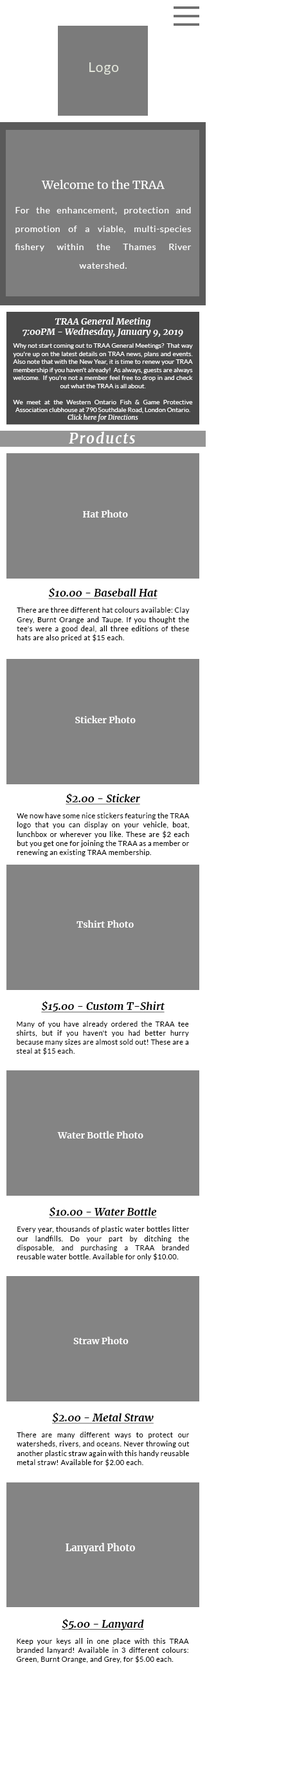
<style>
.page{position:relative;width:288px;height:1773px;background:#ffffff}
.page>*{position:absolute;margin:0}
.t1{font:13.5px "Lato-Regular";letter-spacing:0.05em;color:#e2e5da}
.t2{font:11.6px "Merriweather-Regular";color:#ffffff}
.t3{font:9px/18.3px "Lato-Regular";letter-spacing:0.05em;color:#ffffff}
.t4{font:9px "Merriweather-BoldItalic";color:#ffffff}
.t5{font:6.4px/8px "Lato-Regular";color:#ffffff}
.t6{font:6.4px/8px "Merriweather-Italic";color:#ffffff}
.t7{font:14.1px "Merriweather-BoldItalic";letter-spacing:0.085em;color:#ffffff}
.t8{font:9px "Merriweather-Bold";color:#fefefe}
.t9{font:10.3px "Merriweather-BoldItalic";color:#000000;text-decoration:underline;scale:1.03 1}
.t10{font:7.1px/9.1px "Lato-Regular";letter-spacing:0.05em;color:#000000}
.t11{font:9.5px "Merriweather-Bold";color:#fefefe}
</style>
<div class="page">
<p class="t1" style="left:89px;top:62px;width:30px;height:13px">Logo</p>
<p class="t2" style="left:41px;top:179px;width:124px;height:10px">Welcome to the TRAA</p>
<p class="t3" style="left:15px;top:207px;width:177px;height:62px;text-align:justify">For the enhancement, protection and promotion of a viable, multi-species fishery within the Thames River watershed.</p>
<p class="t4" style="left:22px;top:317px;width:161px;height:20px;text-align:center">TRAA General Meeting<br>7:00PM - Wednesday, January 9, 2019</p>
<p class="t5" style="left:13px;top:343px;width:180px;height:79px;text-align:justify">Why not start coming out to TRAA General Meetings?  That way you're up on the latest details on TRAA news, plans and events.  Also note that with the New Year, it is time to renew your TRAA membership if you haven't already!  As always, guests are always welcome.  If you're not a member feel free to drop in and check out what the TRAA is all about.<br><br>We meet at the Western Ontario Fish &amp; Game Protective Association clubhouse at 790 Southdale Road, London Ontario. <span class="t6"> <br>Click here for Directions</span></p>
<p class="t7" style="left:69px;top:431px;width:66px;height:13px">Products</p>
<p class="t8" style="left:83px;top:510px;width:45px;height:7px">Hat Photo</p>
<p class="t9" style="left:48px;top:588px;width:109px;height:11px">$10.00 - Baseball Hat</p>
<p class="t10" style="left:17px;top:607px;width:173px;height:35px;text-align:justify">There are three different hat colours available: Clay Grey, Burnt Orange and Taupe. If you thought the tee's were a good deal, all three editions of these hats are also priced at $15 each.</p>
<p class="t8" style="left:75px;top:715px;width:61px;height:8px">Sticker Photo</p>
<p class="t9" style="left:66px;top:793px;width:74px;height:12px">$2.00 - Sticker</p>
<p class="t10" style="left:17px;top:813px;width:173px;height:43px;text-align:justify">We now have some nice stickers featuring the TRAA logo that you can display on your vehicle, boat, lunchbox or wherever you like. These are $2 each but you get one for joining the TRAA as a member or renewing an existing TRAA membership.</p>
<p class="t8" style="left:76px;top:920px;width:58px;height:8px">Tshirt Photo</p>
<p class="t9" style="left:41px;top:1001px;width:124px;height:11px">$15.00 - Custom T-Shirt</p>
<p class="t10" style="left:16px;top:1021px;width:173px;height:34px;text-align:justify">Many of you have already ordered the TRAA tee shirts, but if you haven't you had better hurry because many sizes are almost sold out! These are a steal at $15 each.</p>
<p class="t8" style="left:57px;top:1131px;width:86px;height:7px">Water Bottle Photo</p>
<p class="t9" style="left:49px;top:1207px;width:108px;height:11px">$10.00 - Water Bottle</p>
<p class="t10" style="left:17px;top:1226px;width:172px;height:35px;text-align:justify">Every year, thousands of plastic water bottles litter our landfills. Do your part by ditching the disposable, and purchasing a TRAA branded reusable water bottle. Available for only $10.00.</p>
<p class="t8" style="left:73px;top:1336px;width:56px;height:8px">Straw Photo</p>
<p class="t9" style="left:52px;top:1412px;width:102px;height:12px">$2.00 - Metal Straw</p>
<p class="t10" style="left:17px;top:1432px;width:173px;height:34px;text-align:justify">There are many different ways to protect our watersheds, rivers, and oceans. Never throwing out another plastic straw again with this handy reusable metal straw! Available for $2.00 each.</p>
<p class="t11" style="left:66px;top:1543px;width:69px;height:11px">Lanyard Photo</p>
<p class="t9" style="left:62px;top:1619px;width:82px;height:11px">$5.00 - Lanyard</p>
<p class="t10" style="left:16px;top:1638px;width:173px;height:25px;text-align:justify">Keep your keys all in one place with this TRAA branded lanyard! Available in 3 different colours: Green, Burnt Orange, and Grey, for $5.00 each.</p>
</div>
